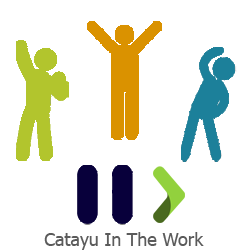
<style>
.page{position:relative;width:250px;height:250px;background:#ffffff}
.page>*{position:absolute;margin:0}
.t1{font:18px "Tahoma";color:#5b5b5b}
</style>
<div class="page">
<p class="t1" style="left:44px;top:232px;width:160px;height:18px">Catayu In The Work</p>
</div>
